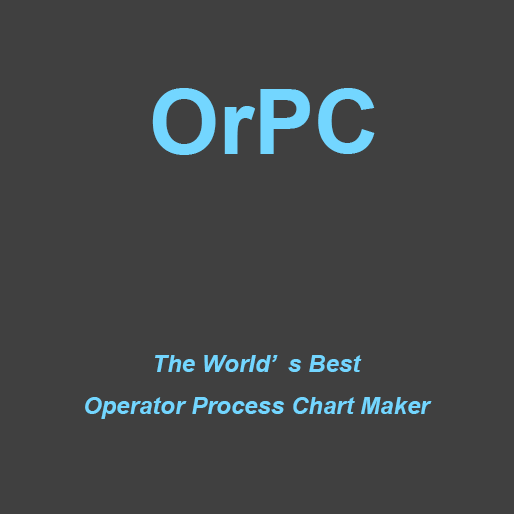
<style>
.page{position:relative;width:514px;height:514px;background:#404040}
.page>*{position:absolute;margin:0}
.t1{font:90px "Arial-BoldMT";color:#73d6ff}
.t2{font:24px "Arial-BoldItalicMT";color:#73d6ff}
</style>
<div class="page">
<p class="t1" style="left:152px;top:88px;width:223px;height:67px">OrPC</p>
<p class="t2" style="left:85px;top:355px;width:347px;height:64px;text-align:center">The World’s Best <br>Operator Process Chart Maker</p>
</div>
